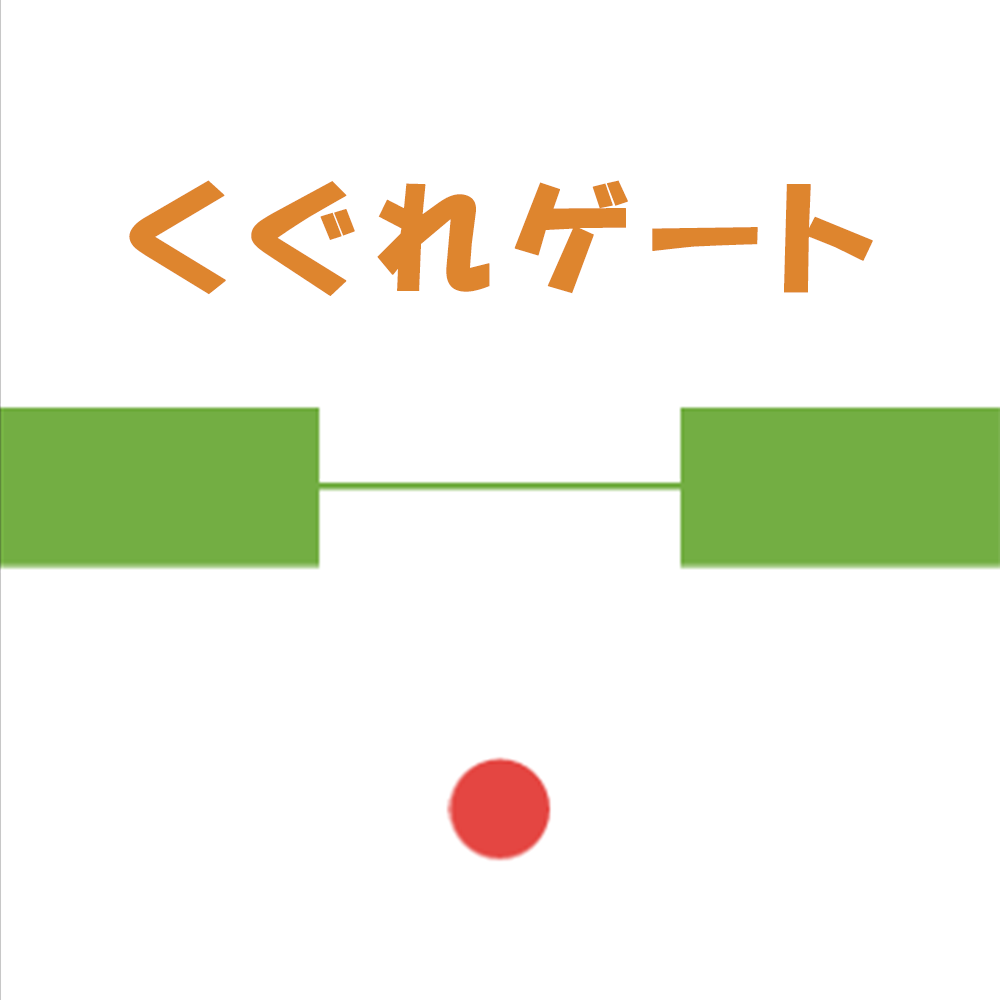
<style>
.page{position:relative;width:1000px;height:1000px;background:#ffffff}
.page>*{position:absolute;margin:0}
.t1{font:125px "HGPSoeiKakupoptai";letter-spacing:0.14em;color:#de852e;font-weight:bold}
</style>
<div class="page">
<p class="t1" style="left:129px;top:180px;width:744px;height:116px">くぐれゲート</p>
</div>
